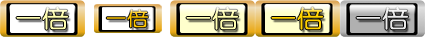
<style>
.page{position:relative;width:425px;height:37px}
.page>*{position:absolute;margin:0}
.t1{font:18.6px "YouYuan";color:#ffc600;font-weight:bold;scale:1.14 1}
.t2{font:23.3px "YouYuan";color:#ffd100;font-weight:bold;scale:1.14 1}
.t3{font:23.3px "YouYuan";color:#eaeaea;font-weight:bold;scale:1.14 1}
</style>
<div class="page">
<p class="t1" style="left:106px;top:9px;width:42px;height:19px">一倍</p>
<p class="t2" style="left:271px;top:7px;width:53px;height:23px">一倍</p>
<p class="t3" style="left:356px;top:7px;width:53px;height:23px">一倍</p>
</div>
